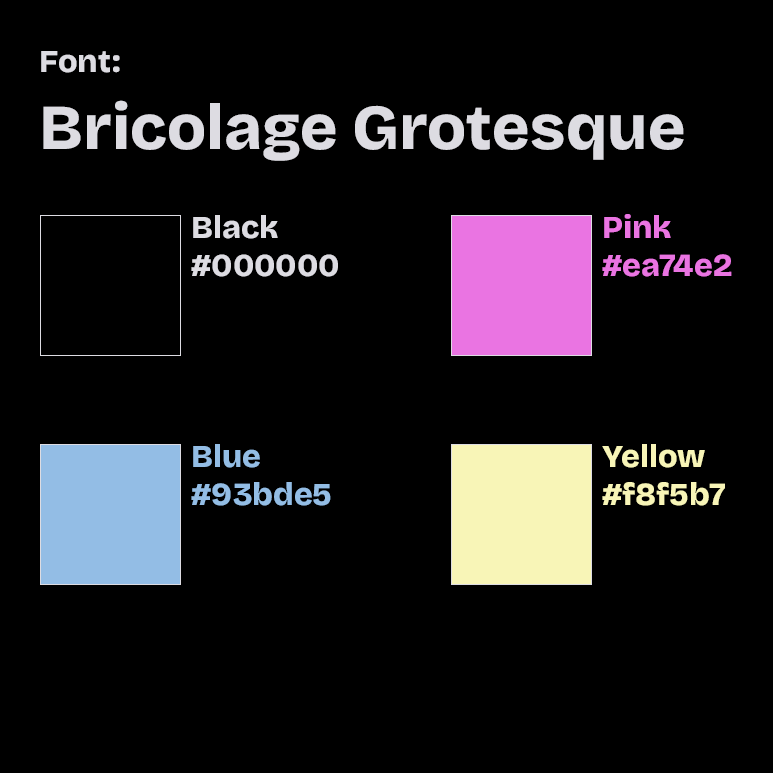
<style>
.page{position:relative;width:773px;height:773px;background:#000000}
.page>*{position:absolute;margin:0}
.t1{font:64px "BricolageGrotesque-ExtraBold";color:#dddce2}
.t2{font:32px "BricolageGrotesque-ExtraBold";color:#dddce2}
.t3{font:32px "BricolageGrotesque-ExtraBold";color:#ea74e2}
.t4{font:32px "BricolageGrotesque-ExtraBold";color:#93bde5}
.t5{font:32px "BricolageGrotesque-ExtraBold";color:#f8f5b7}
</style>
<div class="page">
<p class="t1" style="left:41px;top:51px;width:643px;height:110px"><span class="t2">Font:<br></span>Bricolage Grotesque</p>
<p class="t2" style="left:191px;top:215px;width:147px;height:62px">Black<br>#000000</p>
<p class="t3" style="left:602px;top:214px;width:130px;height:63px">Pink<br>#ea74e2</p>
<p class="t4" style="left:191px;top:444px;width:140px;height:62px">Blue<br>#93bde5</p>
<p class="t5" style="left:602px;top:444px;width:123px;height:62px">Yellow<br>#f8f5b7</p>
</div>
